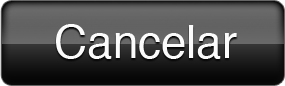
<style>
.page{position:relative;width:285px;height:86px}
.page>*{position:absolute;margin:0}
.t1{font:45.7px "Helvetica";color:#fcfbfb}
</style>
<div class="page">
<p class="t1" style="left:56px;top:24px;width:181px;height:35px">Cancelar</p>
</div>
